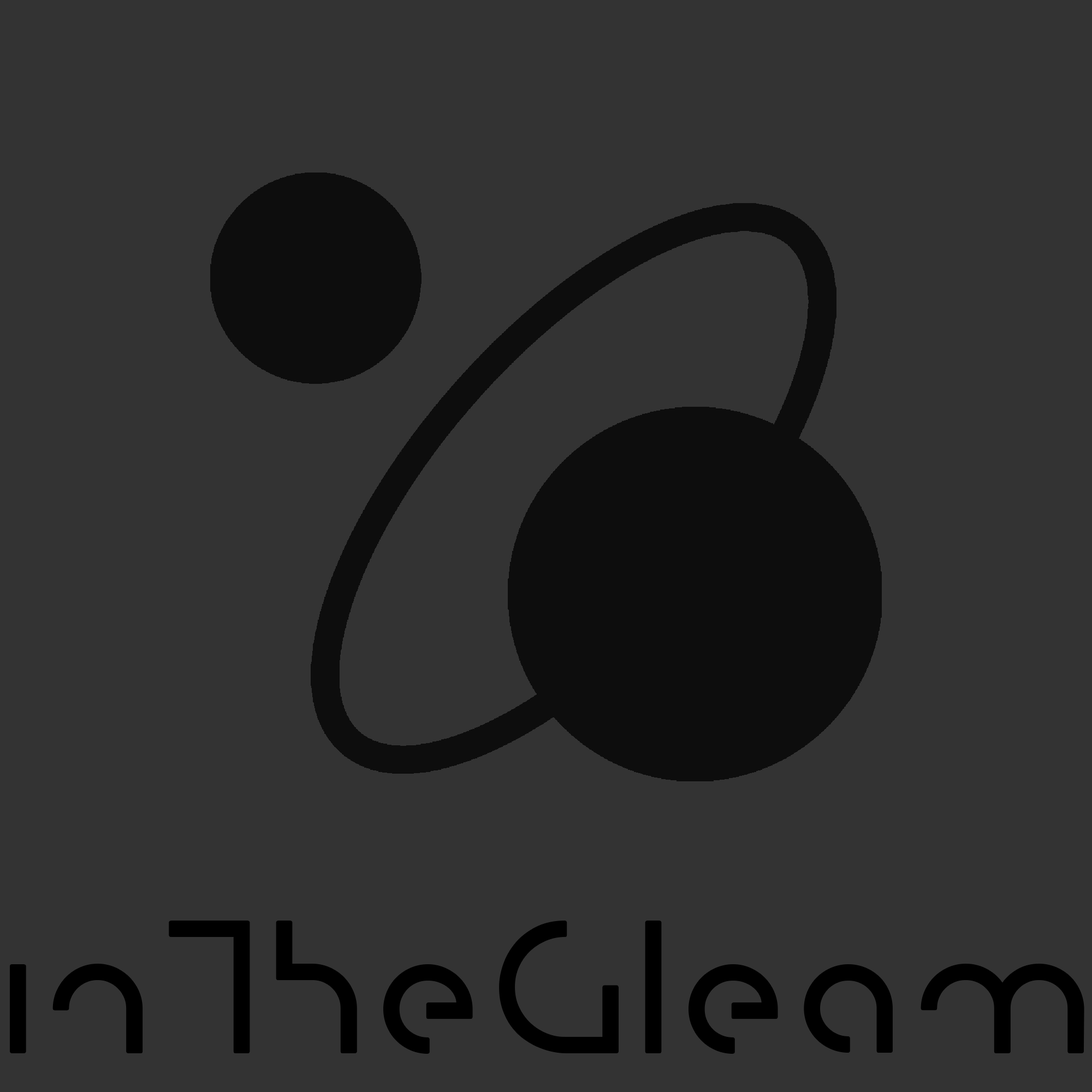
<style>
.page{position:relative;width:1092px;height:1092px;background:#333333}
.page>*{position:absolute;margin:0}
.t1{font:171.8px "DissolveRegular";letter-spacing:0.1em;color:#000000}
</style>
<div class="page">
<p class="t1" style="left:11px;top:922px;width:1072px;height:130px">inTheGleam</p>
</div>
